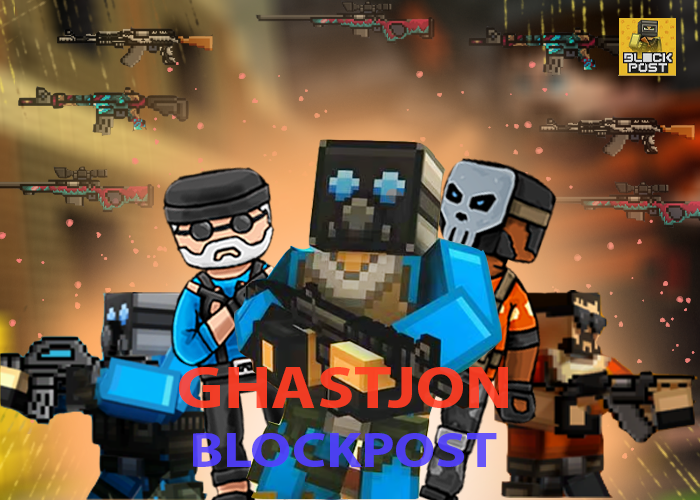
<style>
.page{position:relative;width:700px;height:500px}
.page>*{position:absolute;margin:0}
.t1{font:49.5px "MyriadPro-Bold";color:#503efc;scale:1.16 1}
.t2{font:59.4px "MyriadPro-Bold";color:#ff3d23;scale:1.16 1}
</style>
<div class="page">
<p class="t1" style="left:179px;top:367px;width:329px;height:100px;opacity:0.9"><span class="t2">GHASTJON<br> </span>BLOCKPOST</p>
</div>
